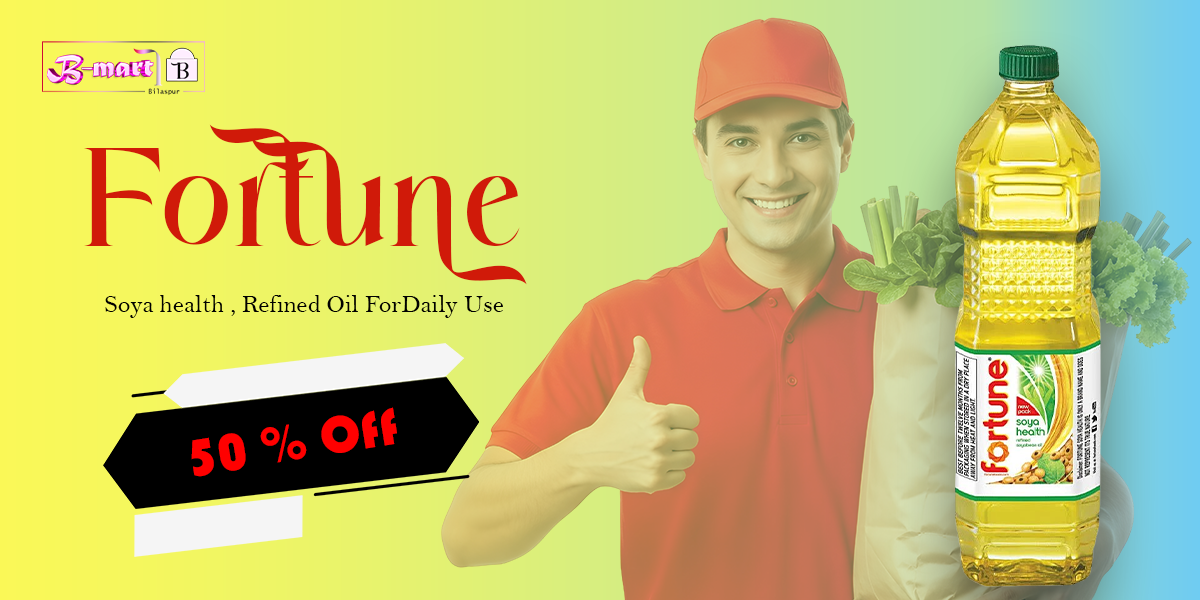
<style>
.page{position:relative;width:1200px;height:600px}
.page>*{position:absolute;margin:0}
.t1{font:126.1px "AghisnaDisplay";color:#d01a09}
.t2{font:25.4px "BellMT";color:#000000}
.t3{font:53.3px "Bauhaus93";color:#ff0000}
</style>
<div class="page">
<p class="t1" style="left:84px;top:124px;width:443px;height:161px">Fortune</p>
<p class="t2" style="left:105px;top:295px;width:398px;height:23px">Soya health , Refined Oil ForDaily Use</p>
<p class="t3" style="left:191px;top:407px;width:206px;height:70px;rotate:-9deg">50 % Off</p>
</div>
